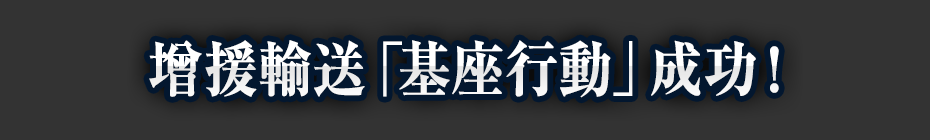
<style>
.page{position:relative;width:930px;height:140px;background:#333333}
.page>*{position:absolute;margin:0}
.t1{font:60px "RyuminPr6N-ExBold";color:#ffffff;font-weight:bold;scale:0.9 1}
</style>
<div class="page">
<p class="t1" style="left:149px;top:40px;width:630px;height:58px">增援輸送「基座行動」成功！</p>
</div>
